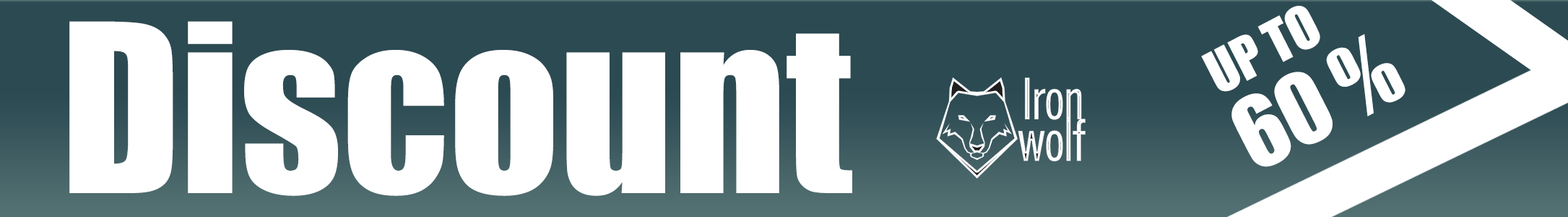
<style>
.page{position:relative;width:1568px;height:217px;background:#ffffff}
.page>*{position:absolute;margin:0}
.t1{font:54.1px "Impact";color:#ffffff}
.t2{font:216.7px "Impact";color:#ffffff}
.t3{font:90.1px "Impact";color:#ffffff}
</style>
<div class="page">
<p class="t1" style="left:1201px;top:6px;width:119px;height:86px;rotate:-28deg">UP TO</p>
<p class="t2" style="left:69px;top:21px;width:783px;height:175px">Discount</p>
<p class="t3" style="left:1231px;top:34px;width:174px;height:133px;rotate:-28deg">60 %</p>
</div>
